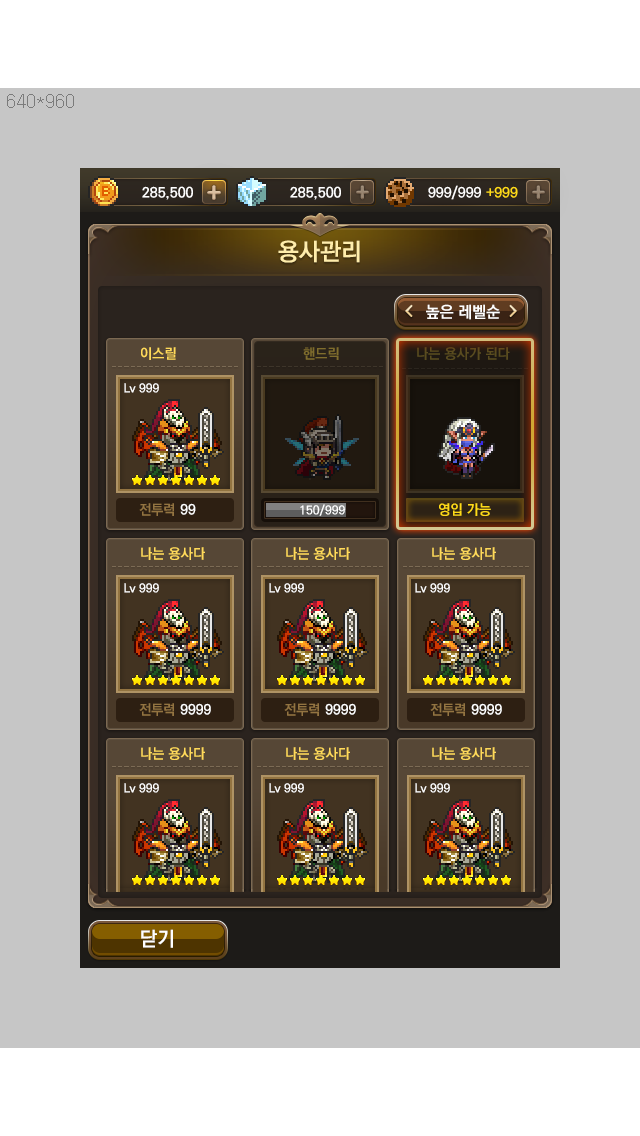
<style>
.page{position:relative;width:640px;height:1136px;background:#c6c6c6}
.page>*{position:absolute;margin:0}
.t1{font:28px "BMJUA";color:#d8bd9f}
.t2{font:28px "BMJUA";color:#988672}
.t3{font:14px "KoPubDotumBold";color:#ffffff}
.t4{font:14px "KoPubDotumBold";color:#ffdb18}
.t5{font:24px "KoPubDotumBold";color:#ffedab}
.t6{font:16px "KoPubDotumBold";color:#ffffff}
.t7{font:14px "KoPubDotumBold";color:#ffda5a}
.t8{font:14px "KoPubDotumBold";color:#7f6d2d}
.t9{font:14px "KoPubDotumBold";color:#5a4c1f}
.t10{font:12px "KoPubDotumBold";color:#ffffff}
.t11{font:14px "KoPubDotumBold";color:#937441}
.t12{font:20px "KoPubDotumBold";color:#ffffff}
</style>
<div class="page">
<p class="t1" style="left:208px;top:185px;width:13px;height:15px">+</p>
<p class="t2" style="left:356px;top:185px;width:13px;height:15px">+</p>
<p class="t3" style="left:428px;top:185px;width:53px;height:15px">999/999</p>
<p class="t2" style="left:532px;top:185px;width:13px;height:15px">+</p>
<p class="t3" style="left:142px;top:186px;width:51px;height:14px">285,500</p>
<p class="t3" style="left:290px;top:186px;width:51px;height:14px">285,500</p>
<p class="t4" style="left:486px;top:186px;width:32px;height:12px">+999</p>
<p class="t5" style="left:278px;top:240px;width:82px;height:23px">용사관리</p>
<p class="t6" style="left:426px;top:304px;width:74px;height:16px">높은 레벨순</p>
<p class="t7" style="left:141px;top:347px;width:35px;height:13px">이스릴</p>
<p class="t8" style="left:303px;top:347px;width:36px;height:13px">핸드릭</p>
<p class="t9" style="left:417px;top:347px;width:93px;height:13px">나는 용사가 된다</p>
<p class="t10" style="left:124px;top:383px;width:35px;height:10px">Lv 999</p>
<p class="t11" style="left:139px;top:503px;width:35px;height:13px">전투력</p>
<p class="t3" style="left:180px;top:503px;width:16px;height:12px">99</p>
<p class="t10" style="left:300px;top:504px;width:45px;height:12px">150/999</p>
<p class="t4" style="left:439px;top:503px;width:52px;height:13px">영입 가능</p>
<p class="t12" style="left:141px;top:929px;width:32px;height:19px">닫기</p>
</div>
